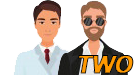
<style>
.page{position:relative;width:135px;height:75px;background:#ffffff}
.page>*{position:absolute;margin:0}
.t1{font:24px "Tahoma-Bold";letter-spacing:-0.065em;font-weight:bold;font-style:italic}
</style>
<div class="page">
<p class="t1" style="left:78px;top:55px;width:56px;height:19px">TWO</p>
</div>
